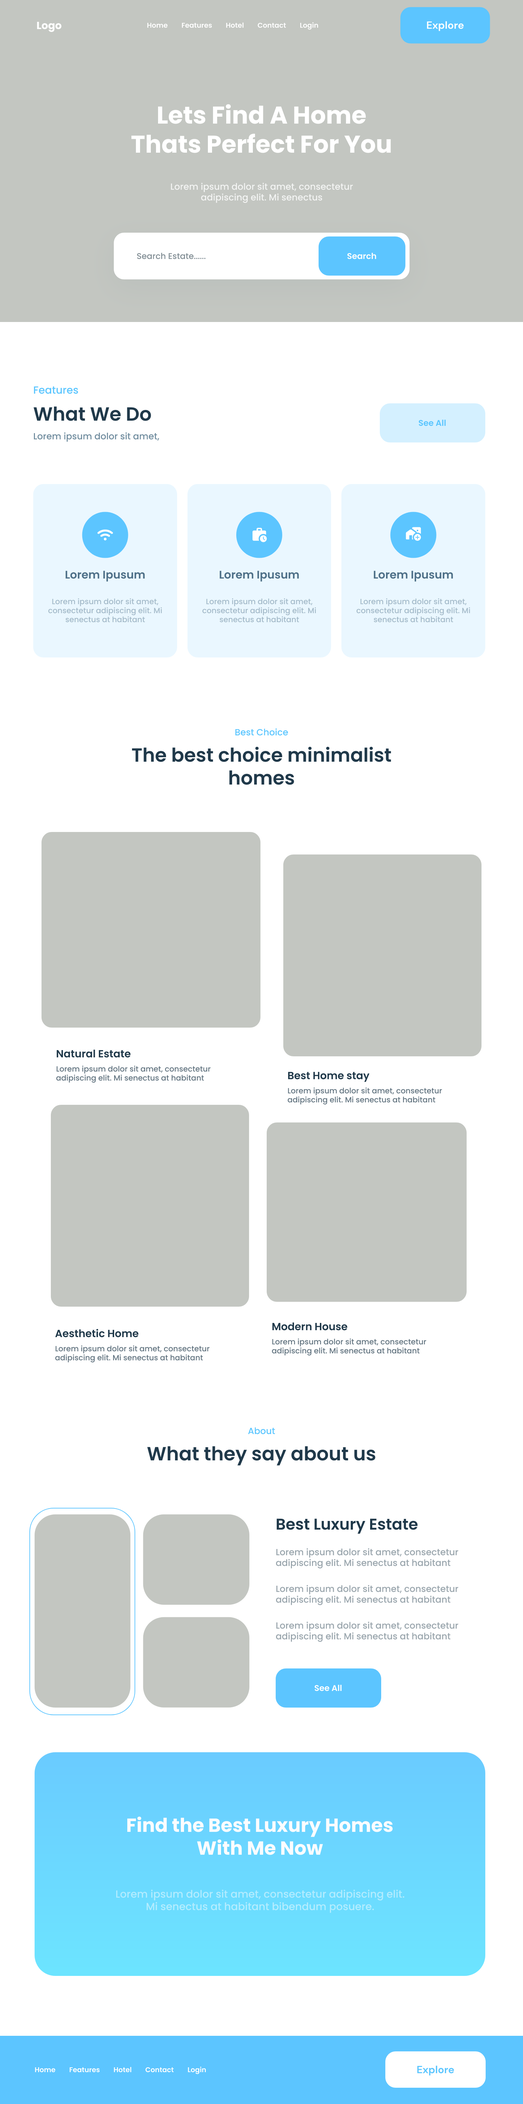
<style>
.page{position:relative;width:523px;height:2104px;background:#ffffff}
.page>*{position:absolute;margin:0}
.t1{font:6.9px "Poppins-SemiBold";color:#ffffff}
.t2{font:10.4px "DMSans-Bold";color:#ffffff}
.t3{font:24.2px "Poppins-Bold";color:#ffffff}
.t4{font:9px "Poppins-Medium";color:#ffffff}
.t5{font:8.3px "Poppins-Medium";color:#828e95}
.t6{font:8.3px "Poppins-SemiBold";color:#fefefe}
.t7{font:10.4px "Poppins-Medium";color:#5cc6ff}
.t8{font:19px "Poppins-SemiBold";color:#20394a}
.t9{font:8.3px "Poppins-SemiBold";color:#5cc6ff}
.t10{font:9px "Poppins-Medium";color:#718d9f}
.t11{font:11.1px "Poppins-SemiBold";color:#4e7087}
.t12{font:7.6px "Poppins-Medium";color:#a4bac9}
.t13{font:9px "Poppins-Medium";color:#5cc6ff}
.t14{font:10.4px "Poppins-SemiBold";color:#20394a}
.t15{font:7.6px "Poppins-Medium";color:#637581}
.t16{font:15.6px "Poppins-SemiBold";color:#20394a}
.t17{font:9px "Poppins-Medium";color:#9aa6ad}
.t18{font:8.3px "Poppins-SemiBold";color:#ffffff}
.t19{font:19px "Poppins-Bold";color:#fbfcfe}
.t20{font:10.4px "Poppins-Medium";color:#b3ecfe}
.t21{font:10.4px "DMSans-Bold";color:#5cc6ff}
</style>
<div class="page">
<p class="t1" style="left:147px;top:23px;width:21px;height:5px">Home</p>
<p class="t1" style="left:182px;top:23px;width:30px;height:5px">Features</p>
<p class="t1" style="left:226px;top:22px;width:18px;height:6px">Hotel</p>
<p class="t1" style="left:258px;top:22px;width:28px;height:6px">Contact</p>
<p class="t1" style="left:300px;top:22px;width:18px;height:8px">Login</p>
<p class="t2" style="left:427px;top:21px;width:37px;height:10px">Explore</p>
<p class="t3" style="left:131px;top:104px;width:260px;height:49px;text-align:center">Lets Find A Home Thats Perfect For You</p>
<p class="t4" style="left:171px;top:182px;width:182px;height:21px;text-align:center;opacity:0.8">Lorem ipsum dolor sit amet, consectetur adipiscing elit. Mi senectus</p>
<p class="t5" style="left:137px;top:253px;width:69px;height:6px">Search Estate......</p>
<p class="t6" style="left:348px;top:253px;width:29px;height:6px">Search</p>
<p class="t7" style="left:34px;top:386px;width:44px;height:8px">Features</p>
<p class="t8" style="left:34px;top:406px;width:117px;height:15px">What We Do</p>
<p class="t9" style="left:419px;top:420px;width:27px;height:6px">See All</p>
<p class="t10" style="left:34px;top:432px;width:126px;height:10px">Lorem ipsum dolor sit amet,</p>
<p class="t11" style="left:65px;top:570px;width:80px;height:12px">Lorem Ipusum</p>
<p class="t11" style="left:220px;top:570px;width:79px;height:12px">Lorem Ipusum</p>
<p class="t11" style="left:374px;top:570px;width:79px;height:12px">Lorem Ipusum</p>
<p class="t12" style="left:48px;top:598px;width:114px;height:24px;text-align:center">Lorem ipsum dolor sit amet, consectetur adipiscing elit. Mi senectus at habitant</p>
<p class="t12" style="left:202px;top:598px;width:114px;height:24px;text-align:center">Lorem ipsum dolor sit amet, consectetur adipiscing elit. Mi senectus at habitant</p>
<p class="t12" style="left:357px;top:598px;width:113px;height:24px;text-align:center">Lorem ipsum dolor sit amet, consectetur adipiscing elit. Mi senectus at habitant</p>
<p class="t13" style="left:235px;top:728px;width:53px;height:8px">Best Choice</p>
<p class="t8" style="left:132px;top:746px;width:260px;height:39px;text-align:center">The best choice minimalist homes</p>
<p class="t14" style="left:57px;top:1049px;width:74px;height:9px">Natural Estate</p>
<p class="t15" style="left:56px;top:1065px;width:155px;height:17px">Lorem ipsum dolor sit amet, consectetur adipiscing elit. Mi senectus at habitant</p>
<p class="t14" style="left:288px;top:1072px;width:82px;height:10px">Best Home stay</p>
<p class="t15" style="left:288px;top:1087px;width:154px;height:17px">Lorem ipsum dolor sit amet, consectetur adipiscing elit. Mi senectus at habitant</p>
<p class="t14" style="left:272px;top:1322px;width:76px;height:8px">Modern House</p>
<p class="t14" style="left:55px;top:1329px;width:84px;height:8px">Aesthetic Home</p>
<p class="t15" style="left:55px;top:1345px;width:155px;height:17px">Lorem ipsum dolor sit amet, consectetur adipiscing elit. Mi senectus at habitant</p>
<p class="t15" style="left:272px;top:1338px;width:154px;height:17px">Lorem ipsum dolor sit amet, consectetur adipiscing elit. Mi senectus at habitant</p>
<p class="t13" style="left:248px;top:1427px;width:27px;height:7px">About</p>
<p class="t8" style="left:147px;top:1446px;width:229px;height:19px">What they say about us</p>
<p class="t16" style="left:277px;top:1518px;width:141px;height:15px">Best Luxury Estate</p>
<p class="t17" style="left:276px;top:1548px;width:183px;height:20px">Lorem ipsum dolor sit amet, consectetur adipiscing elit. Mi senectus at habitant</p>
<p class="t17" style="left:276px;top:1584px;width:183px;height:21px">Lorem ipsum dolor sit amet, consectetur adipiscing elit. Mi senectus at habitant</p>
<p class="t17" style="left:276px;top:1621px;width:183px;height:21px">Lorem ipsum dolor sit amet, consectetur adipiscing elit. Mi senectus at habitant</p>
<p class="t18" style="left:315px;top:1684px;width:27px;height:7px">See All</p>
<p class="t19" style="left:127px;top:1816px;width:266px;height:39px;text-align:center">Find the Best Luxury Homes <br>With Me Now</p>
<p class="t20" style="left:116px;top:1889px;width:289px;height:23px;text-align:center">Lorem ipsum dolor sit amet, consectetur adipiscing elit. Mi senectus at habitant bibendum posuere.</p>
<p class="t1" style="left:35px;top:2067px;width:20px;height:5px">Home</p>
<p class="t1" style="left:70px;top:2067px;width:30px;height:5px">Features</p>
<p class="t1" style="left:114px;top:2067px;width:18px;height:5px">Hotel</p>
<p class="t1" style="left:145px;top:2067px;width:29px;height:5px">Contact</p>
<p class="t1" style="left:188px;top:2066px;width:18px;height:8px">Login</p>
<p class="t21" style="left:417px;top:2065px;width:37px;height:10px">Explore</p>
</div>
